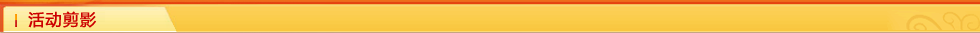
<style>
.page{position:relative;width:980px;height:33px}
.page>*{position:absolute;margin:0}
.t1{font:16px "MicrosoftYaHei";letter-spacing:0.05em;color:#cc0000;font-weight:bold}
</style>
<div class="page">
<p class="t1" style="left:28px;top:11px;width:68px;height:17px">活动剪影</p>
</div>
